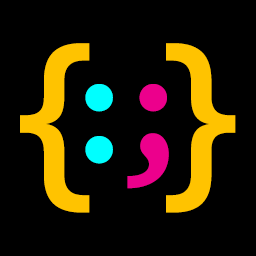
<style>
.page{position:relative;width:256px;height:256px;background:#000000}
.page>*{position:absolute;margin:0}
.t1{font:186.7px "Consolas-Bold";letter-spacing:-0.28em;color:#ffc300}
.t2{font:154.7px "Consolas-Bold";letter-spacing:-0.2em;color:#00ffff}
.t3{font:154.7px "Consolas-Bold";letter-spacing:-0.32em;color:#ec008c}
</style>
<div class="page">
<p class="t1" style="left:20px;top:43px;width:216px;height:170px">{<span class="t2">:</span><span class="t3">;</span>}</p>
</div>
